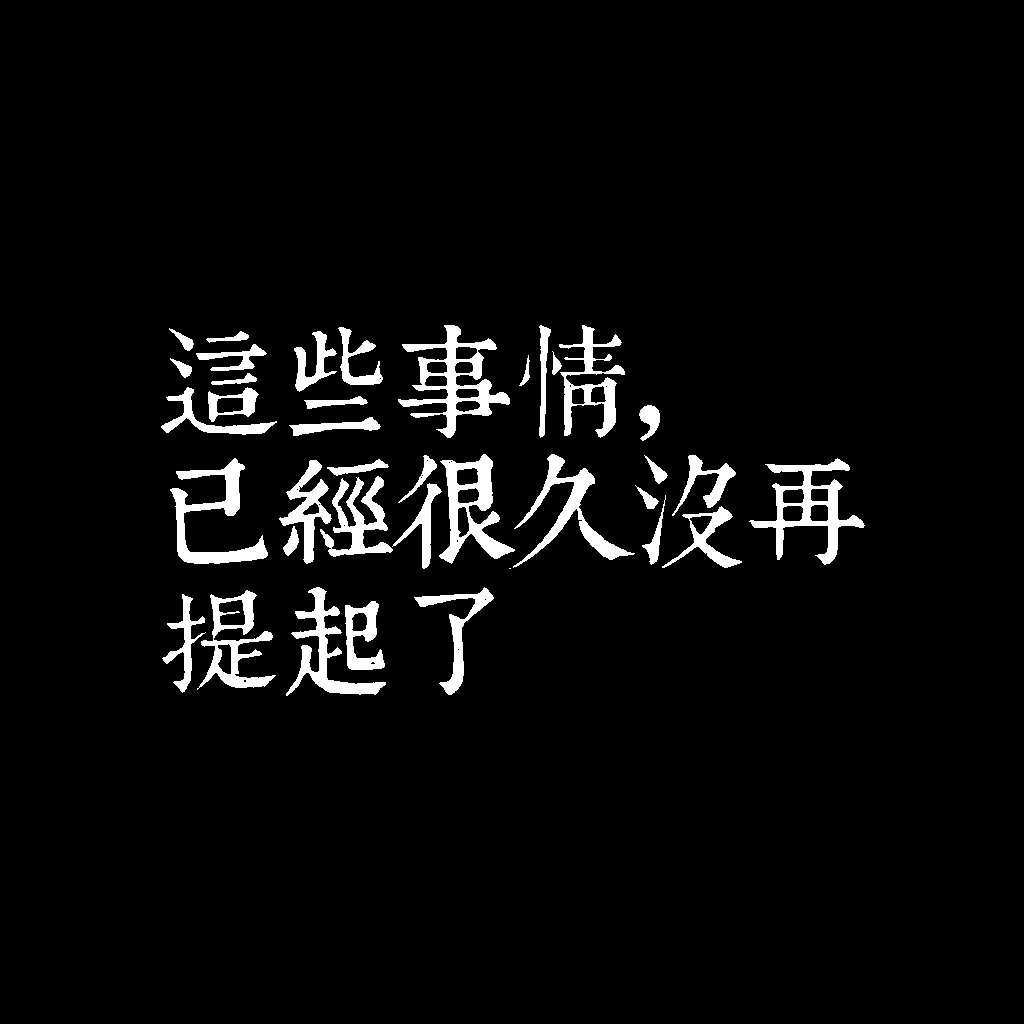
<style>
.page{position:relative;width:1024px;height:1024px;background:#000000}
.page>*{position:absolute;margin:0}
.t1{font:120px/130px "TpldKhangXiDictTrial";letter-spacing:-0.02em;color:#ffffff}
</style>
<div class="page">
<p class="t1" style="left:161px;top:325px;width:704px;height:371px">這些事情，<br>已經很久沒再<br>提起了</p>
</div>
